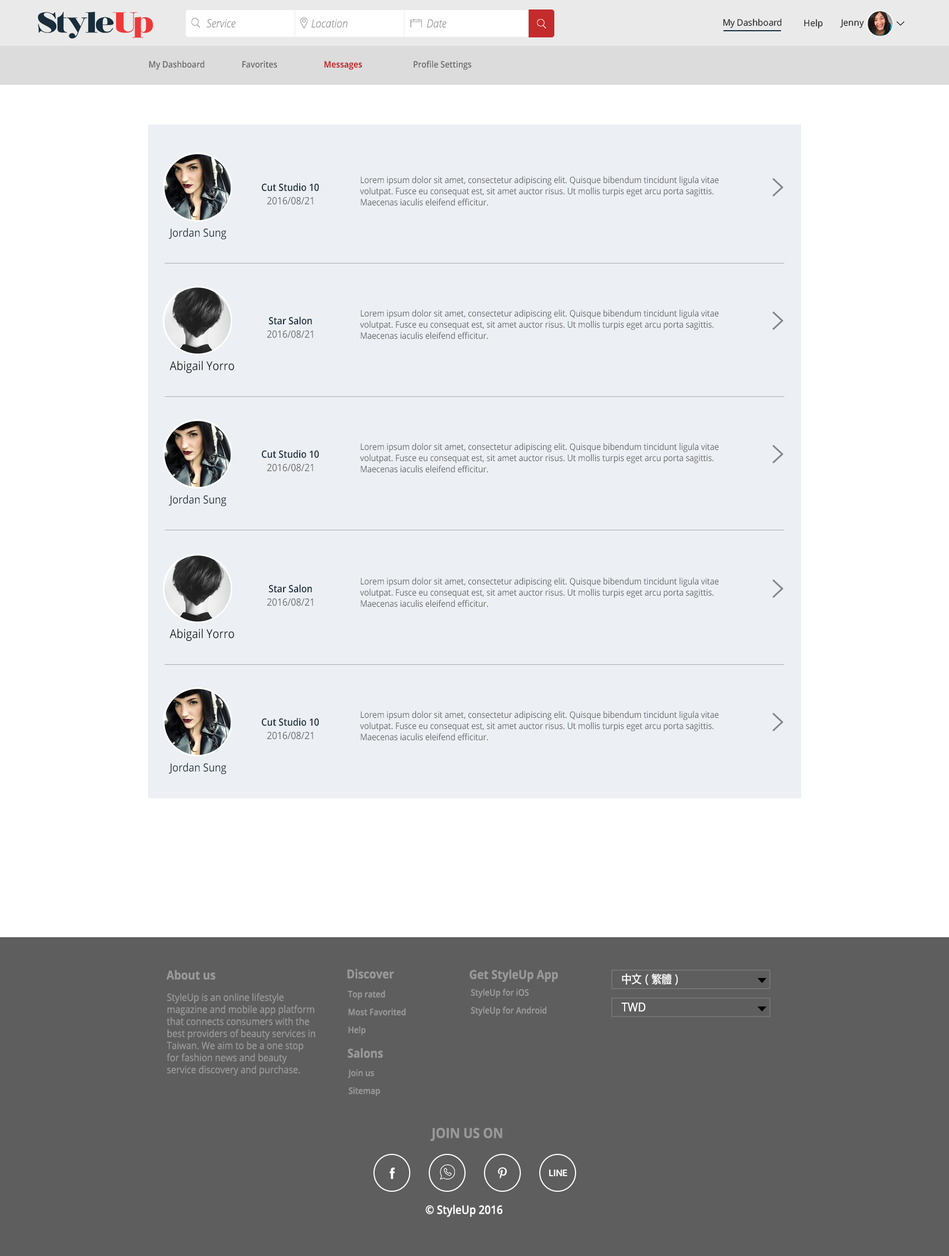
<style>
.page{position:relative;width:949px;height:1256px;background:#ffffff}
.page>*{position:absolute;margin:0}
.t1{font:11.2px "OpenSansLight-Italic";color:#919090;scale:0.91 1}
.t2{font:8.9px "OpenSans";letter-spacing:-0.015em;color:#1a1a1a}
.t3{font:8.9px "OpenSans";color:#1a1a1a}
.t4{font:8.9px "OpenSans-Semibold";color:#666666;scale:0.9 1}
.t5{font:8.9px "OpenSans-Bold";color:#c42b2c;scale:0.9 1}
.t6{font:10.1px "OpenSans-Semibold";color:#192c3b;scale:0.9 1}
.t7{font:8.9px/11.2px "OpenSans";color:#666666;scale:0.9 1}
.t8{font:10.1px "OpenSans";color:#666666;scale:0.9 1}
.t9{font:11.2px "OpenSans";color:#192c3b;scale:0.9 1}
.t10{font:12.1px "OpenSans";color:#1a1a1a;scale:0.9 1}
.t11{font:12.3px "OpenSans-Bold";color:#999999;scale:0.9 1}
.t12{font:11.2px "MicrosoftYaHei-Regular";color:#ffffff;scale:0.9 1}
.t13{font:8.9px/17.9px "OpenSans-Semibold";color:#999999;scale:0.9 1}
.t14{font:10.1px "OpenSans";color:#999999;scale:0.9 1}
.t15{font:12.3px "OpenSans";color:#ffffff;scale:0.9 1}
.t16{font:14px "OpenSans-Bold";color:#999999;scale:0.9 1}
.t17{font:11.7px "OpenSans-Semibold";color:#ffffff;scale:0.9 1}
</style>
<div class="page">
<p class="t1" style="left:207px;top:19px;width:29px;height:9px">Service</p>
<p class="t1" style="left:312px;top:19px;width:36px;height:9px">Location</p>
<p class="t1" style="left:427px;top:19px;width:20px;height:9px">Date</p>
<p class="t2" style="left:723px;top:18px;width:59px;height:10px">My Dashboard</p>
<p class="t3" style="left:804px;top:19px;width:19px;height:9px">Help</p>
<p class="t3" style="left:840px;top:19px;width:24px;height:9px">Jenny</p>
<p class="t4" style="left:149px;top:60px;width:55px;height:10px">My Dashboard</p>
<p class="t4" style="left:242px;top:61px;width:35px;height:7px">Favorites</p>
<p class="t5" style="left:324px;top:61px;width:38px;height:9px">Messages</p>
<p class="t4" style="left:414px;top:60px;width:58px;height:10px">Profile Settings</p>
<p class="t6" style="left:262px;top:183px;width:57px;height:9px">Cut Studio 10</p>
<p class="t7" style="left:360px;top:176px;width:359px;height:30px">Lorem ipsum dolor sit amet, consectetur adipiscing elit. Quisque bibendum tincidunt ligula vitae volutpat. Fusce eu consequat est, sit amet auctor risus. Ut mollis turpis eget arcu porta sagittis. Maecenas iaculis eleifend efficitur.</p>
<p class="t8" style="left:267px;top:197px;width:46px;height:8px">2016/08/21</p>
<p class="t9" style="left:169px;top:228px;width:58px;height:12px">Jordan Sung</p>
<p class="t6" style="left:269px;top:317px;width:43px;height:8px">Star Salon</p>
<p class="t7" style="left:360px;top:309px;width:359px;height:30px">Lorem ipsum dolor sit amet, consectetur adipiscing elit. Quisque bibendum tincidunt ligula vitae volutpat. Fusce eu consequat est, sit amet auctor risus. Ut mollis turpis eget arcu porta sagittis. Maecenas iaculis eleifend efficitur.</p>
<p class="t8" style="left:267px;top:331px;width:46px;height:7px">2016/08/21</p>
<p class="t10" style="left:170px;top:361px;width:65px;height:13px"><span class="t9"><br></span>Abigail Yorro</p>
<p class="t7" style="left:360px;top:443px;width:359px;height:30px">Lorem ipsum dolor sit amet, consectetur adipiscing elit. Quisque bibendum tincidunt ligula vitae volutpat. Fusce eu consequat est, sit amet auctor risus. Ut mollis turpis eget arcu porta sagittis. Maecenas iaculis eleifend efficitur.</p>
<p class="t6" style="left:262px;top:450px;width:57px;height:8px">Cut Studio 10</p>
<p class="t8" style="left:267px;top:464px;width:46px;height:8px">2016/08/21</p>
<p class="t9" style="left:169px;top:495px;width:58px;height:11px">Jordan Sung</p>
<p class="t7" style="left:360px;top:577px;width:359px;height:30px">Lorem ipsum dolor sit amet, consectetur adipiscing elit. Quisque bibendum tincidunt ligula vitae volutpat. Fusce eu consequat est, sit amet auctor risus. Ut mollis turpis eget arcu porta sagittis. Maecenas iaculis eleifend efficitur.</p>
<p class="t6" style="left:269px;top:585px;width:43px;height:8px">Star Salon</p>
<p class="t8" style="left:267px;top:599px;width:46px;height:7px">2016/08/21</p>
<p class="t10" style="left:170px;top:629px;width:65px;height:13px"><span class="t9"><br></span>Abigail Yorro</p>
<p class="t7" style="left:360px;top:711px;width:359px;height:30px">Lorem ipsum dolor sit amet, consectetur adipiscing elit. Quisque bibendum tincidunt ligula vitae volutpat. Fusce eu consequat est, sit amet auctor risus. Ut mollis turpis eget arcu porta sagittis. Maecenas iaculis eleifend efficitur.</p>
<p class="t6" style="left:262px;top:718px;width:57px;height:8px">Cut Studio 10</p>
<p class="t8" style="left:267px;top:732px;width:46px;height:8px">2016/08/21</p>
<p class="t9" style="left:169px;top:763px;width:58px;height:11px">Jordan Sung</p>
<p class="t11" style="left:166px;top:970px;width:50px;height:10px">About us</p>
<p class="t11" style="left:347px;top:969px;width:47px;height:10px">Discover</p>
<p class="t11" style="left:470px;top:969px;width:88px;height:13px">Get StyleUp App</p>
<p class="t12" style="left:622px;top:974px;width:56px;height:11px">中文（繁體）</p>
<p class="t13" style="left:471px;top:989px;width:76px;height:27px;text-align:right">StyleUp for iOS<br>StyleUp for Android</p>
<p class="t14" style="left:166px;top:993px;width:149px;height:83px;text-align:right">StyleUp is an online lifestyle magazine and mobile app platform that connects consumers with the best providers of beauty services in Taiwan. We aim to be a one stop for fashion news and beauty service discovery and purchase.</p>
<p class="t13" style="left:348px;top:991px;width:58px;height:45px;text-align:right">Top rated<br>Most Favorited<br>Help</p>
<p class="t15" style="left:621px;top:1003px;width:24px;height:9px">TWD</p>
<p class="t11" style="left:348px;top:1048px;width:35px;height:10px">Salons</p>
<p class="t13" style="left:348px;top:1069px;width:32px;height:28px;text-align:right">Join us<br>Sitemap</p>
<p class="t16" style="left:430px;top:1128px;width:73px;height:13px">JOIN US ON</p>
<p class="t17" style="left:425px;top:1205px;width:78px;height:12px">© StyleUp 2016</p>
</div>
